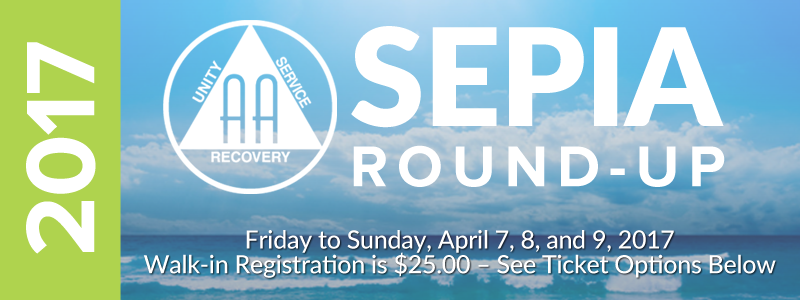
<style>
.page{position:relative;width:800px;height:300px}
.page>*{position:absolute;margin:0}
.t1{font:135.6px "Lato-Black";letter-spacing:-0.01em;color:#ffffff}
.t2{font:100.6px "ProximaNova-Bold";letter-spacing:-0.01em;color:#ffffff}
.t3{font:59.8px "ProximaNova-Bold";letter-spacing:0.15em;color:#ffffff}
.t4{font:25px/25px "Lato-Medium";letter-spacing:-0.01em;color:#ffffff}
</style>
<div class="page">
<p class="t1" style="left:351px;top:26px;width:373px;height:102px">SEPIA</p>
<p class="t2" style="left:26px;top:42px;width:70px;height:212px;rotate:-90deg">2017</p>
<p class="t3" style="left:353px;top:145px;width:372px;height:42px">ROUND-UP</p>
<p class="t4" style="left:143px;top:230px;width:633px;height:48px;text-align:center">Friday to Sunday, April 7, 8, and 9, 2017<br>Walk-in Registration is $25.00 – See Ticket Options Below</p>
</div>
